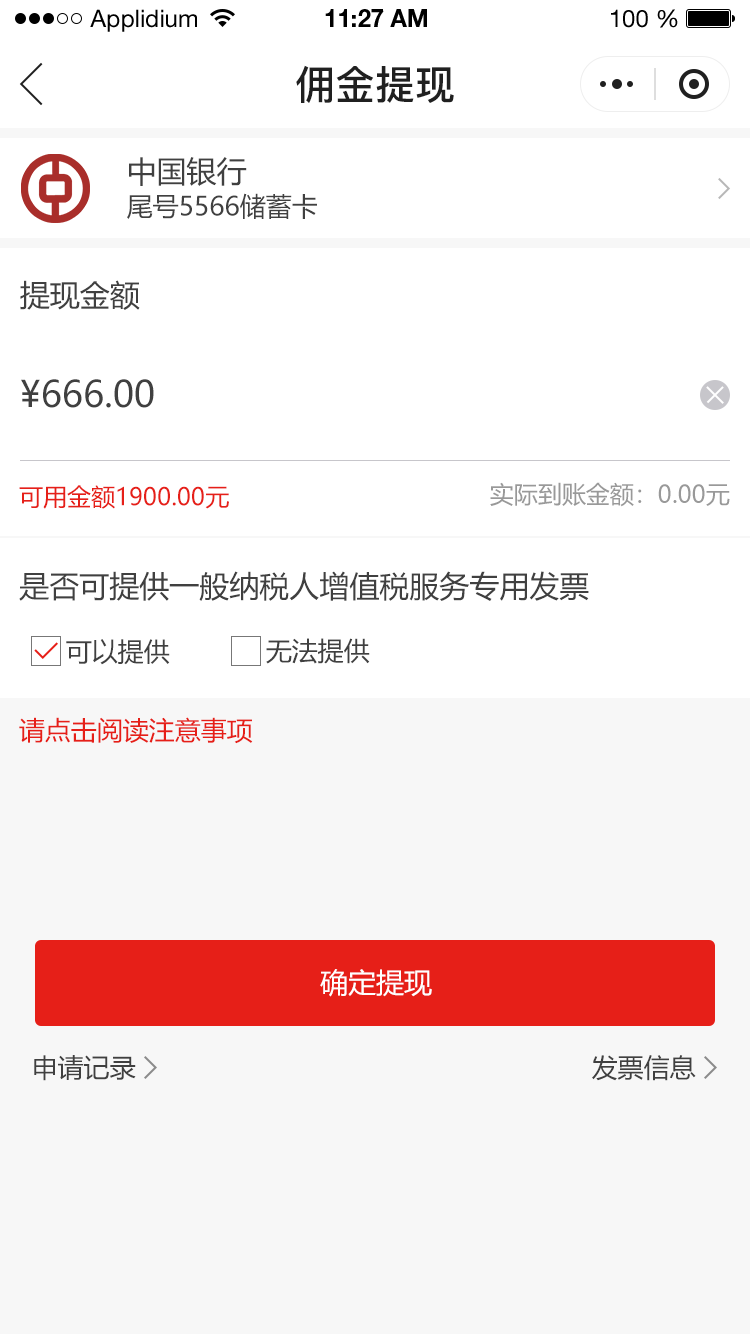
<style>
.page{position:relative;width:750px;height:1334px;background:#f7f7f7}
.page>*{position:absolute;margin:0}
.t1{font:24px "HelveticaNeueLTStd-Roman";color:#000000}
.t2{font:24px "HelveticaNeueLTStd-Bd";color:#000000}
.t3{font:40px "PingFang-SC-Bold";color:#202020;text-transform:uppercase}
.t4{font:30px "MicrosoftYaHei";color:#404040;text-transform:uppercase}
.t5{font:26px "MicrosoftYaHei";color:#404040;text-transform:uppercase}
.t6{font:36px "MicrosoftYaHei";color:#404040;text-transform:uppercase}
.t7{font:24px "MicrosoftYaHei";color:#e61f18;text-transform:uppercase}
.t8{font:24px "MicrosoftYaHei";color:#999999;text-transform:uppercase}
.t9{font:26px "MicrosoftYaHei";color:#e61f18;text-transform:uppercase}
.t10{font:28px "MicrosoftYaHei";color:#ffffff;text-transform:uppercase}
</style>
<div class="page">
<p class="t1" style="left:90px;top:9px;width:107px;height:23px">Applidium</p>
<p class="t2" style="left:325px;top:9px;width:102px;height:18px">11:27 AM</p>
<p class="t1" style="left:611px;top:9px;width:67px;height:19px">100 %</p>
<p class="t3" style="left:296px;top:65px;width:158px;height:38px">佣金提现</p>
<p class="t4" style="left:129px;top:157px;width:118px;height:29px">中国银行</p>
<p class="t5" style="left:127px;top:193px;width:190px;height:26px">尾号5566储蓄卡</p>
<p class="t4" style="left:20px;top:280px;width:120px;height:30px">提现金额</p>
<p class="t6" style="left:21px;top:379px;width:133px;height:29px">¥666.00</p>
<p class="t7" style="left:19px;top:485px;width:210px;height:24px">可用金额1900.00元</p>
<p class="t8" style="left:490px;top:482px;width:240px;height:25px">实际到账金额：0.00元</p>
<p class="t4" style="left:19px;top:571px;width:570px;height:30px">是否可提供一般纳税人增值税服务专用发票</p>
<p class="t5" style="left:66px;top:639px;width:104px;height:26px">可以提供</p>
<p class="t5" style="left:266px;top:638px;width:104px;height:26px">无法提供</p>
<p class="t9" style="left:19px;top:717px;width:234px;height:27px">请点击阅读注意事项</p>
<p class="t10" style="left:320px;top:969px;width:112px;height:28px">确定提现</p>
<p class="t5" style="left:34px;top:1055px;width:102px;height:26px">申请记录</p>
<p class="t5" style="left:592px;top:1055px;width:104px;height:26px">发票信息</p>
</div>
